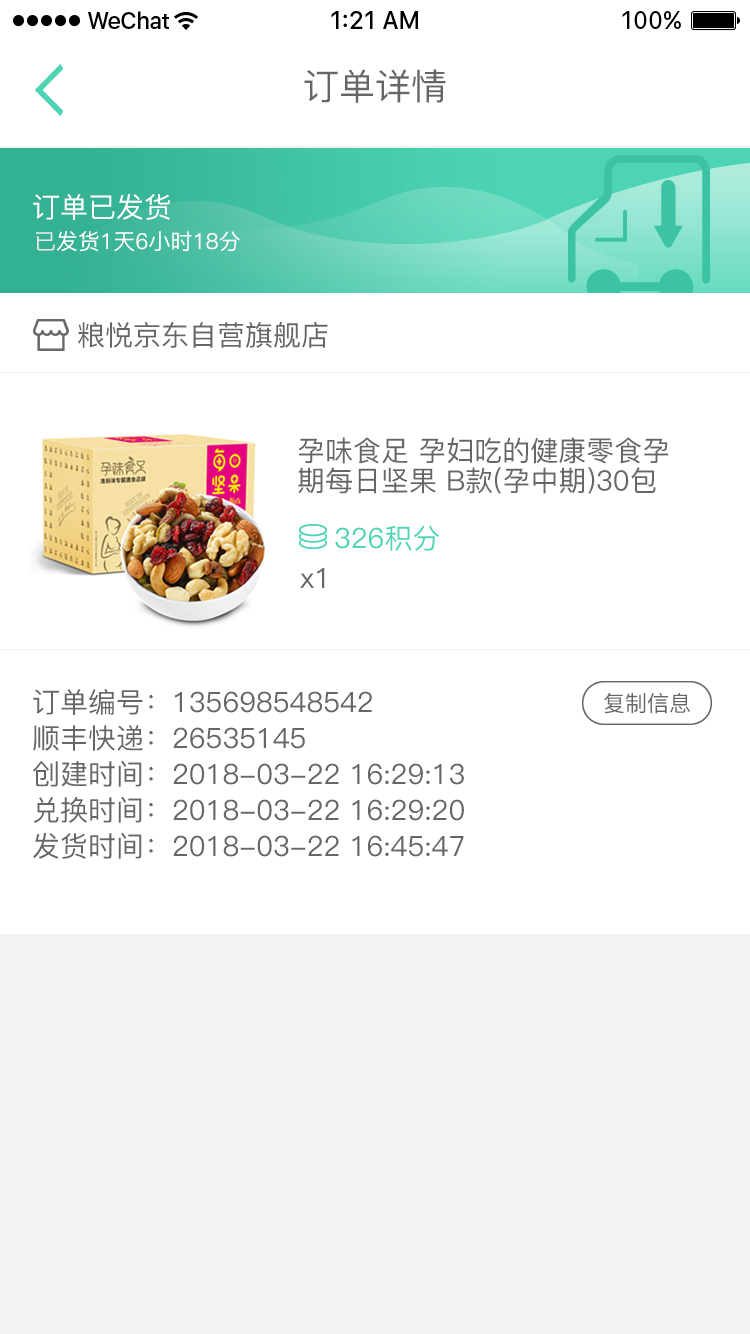
<style>
.page{position:relative;width:750px;height:1334px;background:#ffffff}
.page>*{position:absolute;margin:0}
.t1{font:36px "PingFang-SC-Medium";color:#666666}
.t2{font:28px "PingFang-SC-Medium";color:#ffffff}
.t3{font:22px "PingFang-SC-Medium";color:#ffffff}
.t4{font:22px "PingFang-SC-Medium";color:#e8e8e8}
.t5{font:28px "PingFang-SC-Medium";color:#666666}
.t6{font:28px/30px "PingFang-SC-Medium";color:#666666}
.t7{font:28px "PingFang-SC-Medium";color:#4cd4b4}
.t8{font:28px/36px "PingFang-SC-Medium";color:#666666}
.t9{font:22px "PingFang-SC-Medium";color:#666666}
</style>
<div class="page">
<p class="t1" style="left:304px;top:69px;width:142px;height:34px">订单详情</p>
<p class="t2" style="left:33px;top:194px;width:137px;height:26px">订单已发货</p>
<p class="t3" style="left:36px;top:231px;width:204px;height:21px"><span class="t4">已</span>发货1天6小时18分</p>
<p class="t5" style="left:78px;top:322px;width:250px;height:26px">粮悦京东自营旗舰店</p>
<p class="t6" style="left:298px;top:437px;width:371px;height:57px">孕味食足 孕妇吃的健康零食孕期每日坚果 B款(孕中期)30包</p>
<p class="t7" style="left:335px;top:525px;width:104px;height:26px">326积分</p>
<p class="t5" style="left:300px;top:568px;width:25px;height:20px">x1</p>
<p class="t8" style="left:33px;top:689px;width:431px;height:170px">订单编号：135698548542<br>顺丰快递：26535145<br>创建时间：2018-03-22 16:29:13<br>兑换时间：2018-03-22 16:29:20<br>发货时间：2018-03-22 16:45:47</p>
<p class="t9" style="left:604px;top:692px;width:86px;height:22px">复制信息</p>
</div>
